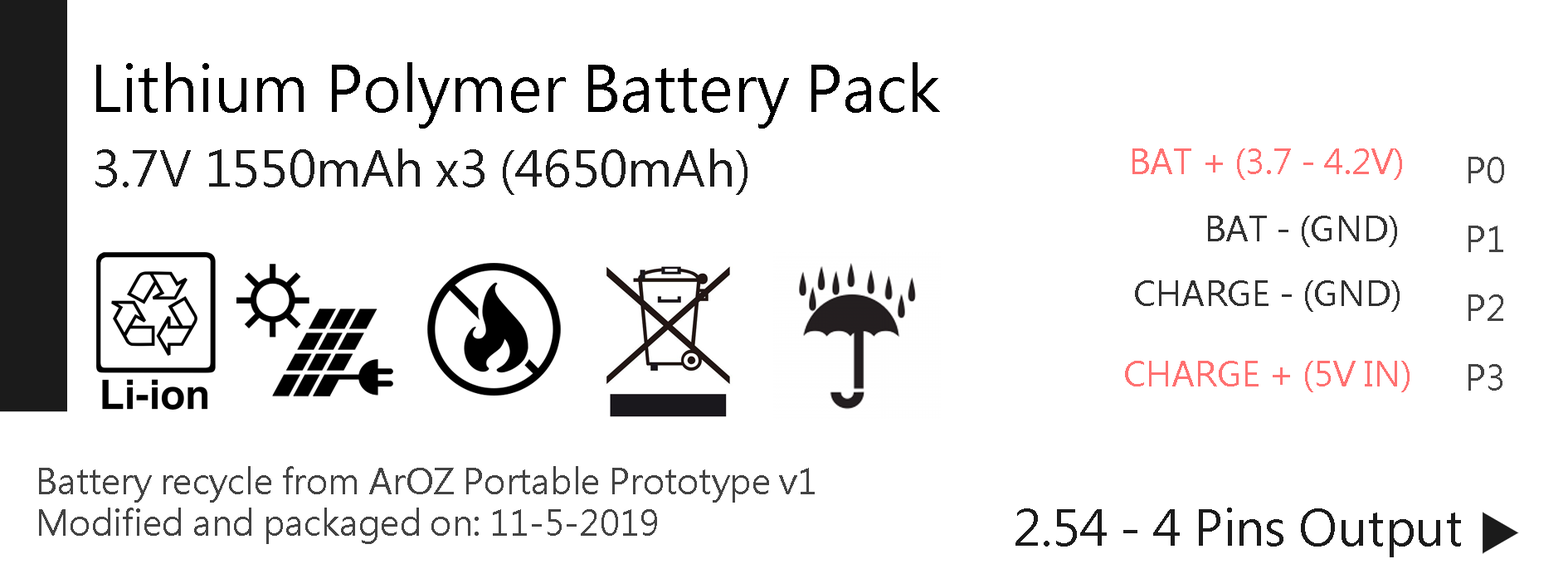
<style>
.page{position:relative;width:1568px;height:588px;background:#ffffff}
.page>*{position:absolute;margin:0}
.t1{font:62.2px "MicrosoftJhengHeiRegular";color:#000000}
.t2{font:48.4px "MicrosoftJhengHeiRegular";color:#1b1b1b}
.t3{font:33.9px "MicrosoftJhengHeiRegular";color:#ff7171}
.t4{font:34.6px/69.1px "MicrosoftJhengHeiRegular";color:#434343}
.t5{font:33.9px "MicrosoftJhengHeiRegular";color:#313131}
.t6{font:34.6px/41.5px "MicrosoftJhengHeiRegular";color:#434343}
</style>
<div class="page">
<p class="t1" style="left:96px;top:62px;width:844px;height:67px">Lithium Polymer Battery Pack</p>
<p class="t2" style="left:95px;top:149px;width:652px;height:46px">3.7V 1550mAh x3 (4650mAh)</p>
<p class="t3" style="left:1132px;top:149px;width:270px;height:31px">BAT + (3.7 - 4.2V)</p>
<p class="t4" style="left:1468px;top:157px;width:36px;height:234px">P0<br>P1<br>P2<br>P3</p>
<p class="t5" style="left:1208px;top:216px;width:189px;height:31px">BAT - (GND)</p>
<p class="t5" style="left:1135px;top:280px;width:265px;height:32px">CHARGE - (GND)</p>
<p class="t3" style="left:1125px;top:361px;width:285px;height:31px">CHARGE + (5V IN)</p>
<p class="t6" style="left:39px;top:466px;width:776px;height:78px">Battery recycle from ArOZ Portable Prototype v1<br>Modified and packaged on: 11-5-2019</p>
<p class="t2" style="left:1015px;top:508px;width:446px;height:50px">2.54 - 4 Pins Output</p>
</div>
